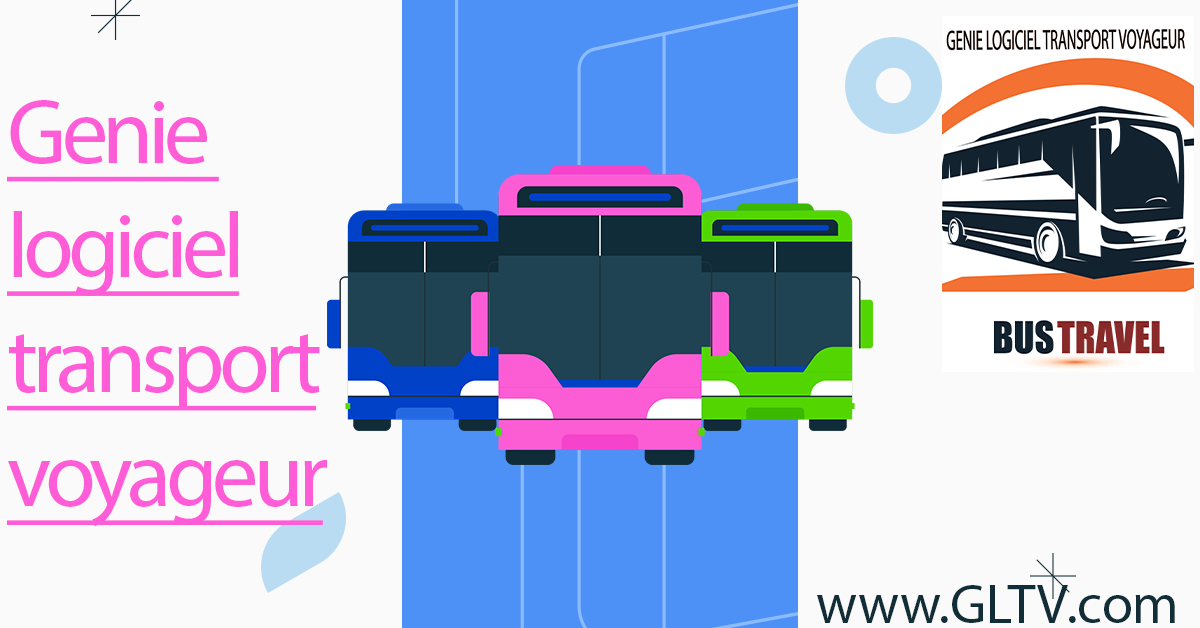
<style>
.page{position:relative;width:1200px;height:628px;background:#fafafa}
.page>*{position:absolute;margin:0}
.t1{font:92.5px/114.5px "MyriadPro-Regular";letter-spacing:-0.06em;color:#ff5dd7;text-decoration:underline}
.t2{font:55.8px "MyriadPro-Regular";color:#102d38}
</style>
<div class="page">
<p class="t1" style="left:7px;top:100px;width:320px;height:427px">Genie <br>logiciel<br>transport<br>voyageur</p>
<p class="t2" style="left:817px;top:585px;width:358px;height:38px">www.GLTV.com</p>
</div>
